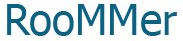
<style>
.page{position:relative;width:183px;height:41px;background:#ffffff}
.page>*{position:absolute;margin:0}
.t1{font:42px "Tahoma";color:#0b6283}
</style>
<div class="page">
<p class="t1" style="left:7px;top:4px;width:170px;height:32px">RooMMer</p>
</div>
